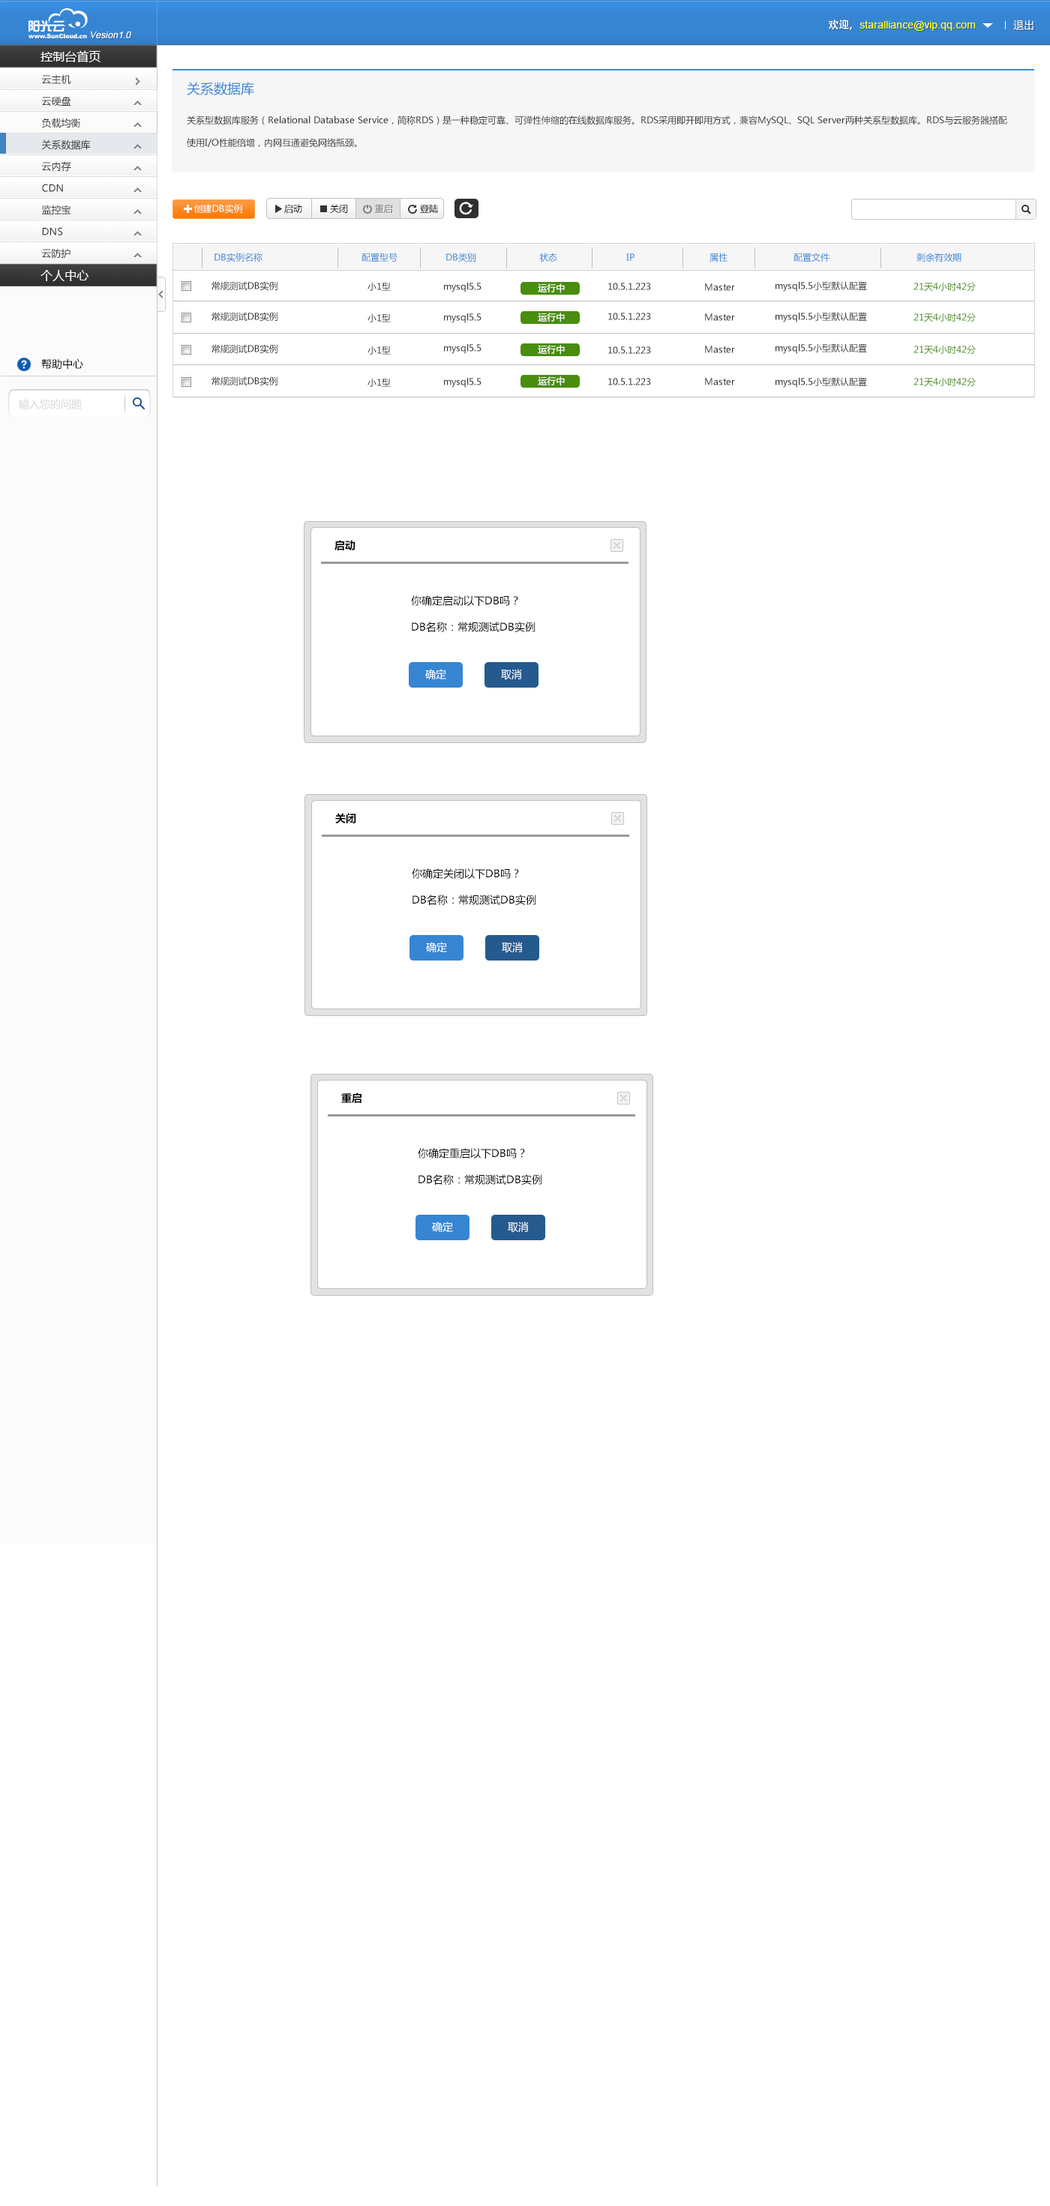
<style>
.page{position:relative;width:1050px;height:2206px;background:#ffffff}
.page>*{position:absolute;margin:0}
.t1{font:10.5px "ArialMT";color:#fcff0e}
.t2{font:10.5px "AdobeHeitiStd-Regular";color:#ffffff}
.t3{font:10.5px "MicrosoftYaHei";color:#ffffff}
.t4{font:9px "ArialMT";color:#ffffff;font-style:italic}
.t5{font:12px "MicrosoftYaHei";color:#ffffff}
.t6{font:9.8px "MicrosoftYaHei";color:#333333}
.t7{font:13.5px "MicrosoftYaHei";color:#3685d3}
.t8{font:9px/22.5px "MicrosoftYaHei";color:#333333}
.t9{font:9px "MicrosoftYaHei";color:#fefefe}
.t10{font:9px "MicrosoftYaHei";color:#000000}
.t11{font:9px "MicrosoftYaHei";color:#696868}
.t12{font:9px "MicrosoftYaHei";color:#3685d3}
.t13{font:9px "MicrosoftYaHei";color:#333333}
.t14{font:9px "MicrosoftYaHei";color:#ffffff}
.t15{font:9px "MicrosoftYaHei";color:#488d0e}
.t16{font:10.5px "MicrosoftYaHei";color:#000000}
.t17{font:10.5px "MicrosoftYaHei";color:#d7d7d7}
.t18{font:10.5px "MicrosoftYaHei-Bold";color:#000000}
.t19{font:10.5px/26.2px "MicrosoftYaHei";color:#000000}
</style>
<div class="page">
<p class="t1" style="left:829px;top:20px;width:147px;height:11px"><span class="t2">欢迎，</span>staralliance@vip.qq.com</p>
<p class="t3" style="left:1013px;top:20px;width:21px;height:10px">退出</p>
<p class="t4" style="left:91px;top:32px;width:40px;height:6px">Vesion1.0</p>
<p class="t5" style="left:40px;top:50px;width:60px;height:13px">控制台首页</p>
<p class="t6" style="left:41px;top:74px;width:30px;height:11px">云主机</p>
<p class="t7" style="left:187px;top:82px;width:67px;height:13px">关系数据库</p>
<p class="t6" style="left:41px;top:96px;width:30px;height:10px">云硬盘</p>
<p class="t6" style="left:41px;top:118px;width:39px;height:10px">负载均衡</p>
<p class="t8" style="left:187px;top:116px;width:820px;height:32px">关系型数据库服务（Relational Database Service，简称RDS）是一种稳定可靠、可弹性伸缩的在线数据库服务。RDS采用即开即用方式，兼容MySQL、SQL Server两种关系型数据库。RDS与云服务器搭配使用I/O性能倍增，内网互通避免网络瓶颈。</p>
<p class="t6" style="left:41px;top:140px;width:50px;height:10px">关系数据库</p>
<p class="t6" style="left:41px;top:161px;width:30px;height:11px">云内存</p>
<p class="t6" style="left:42px;top:184px;width:21px;height:8px">CDN</p>
<p class="t6" style="left:41px;top:205px;width:30px;height:9px">监控宝</p>
<p class="t9" style="left:194px;top:204px;width:48px;height:10px">创建DB实例</p>
<p class="t10" style="left:284px;top:204px;width:18px;height:10px">启动</p>
<p class="t10" style="left:330px;top:204px;width:18px;height:10px">关闭</p>
<p class="t11" style="left:375px;top:204px;width:18px;height:10px">重启</p>
<p class="t10" style="left:420px;top:204px;width:18px;height:9px">登陆</p>
<p class="t6" style="left:42px;top:227px;width:21px;height:9px">DNS</p>
<p class="t6" style="left:41px;top:248px;width:29px;height:11px">云防护</p>
<p class="t12" style="left:214px;top:253px;width:748px;height:9px">DB实例名称                                 配置型号                DB类别                     状态                       IP                         属性                      配置文件                             剩余有效期</p>
<p class="t5" style="left:40px;top:270px;width:48px;height:11px">个人中心</p>
<p class="t13" style="left:212px;top:281px;width:66px;height:10px">常规测试DB实例</p>
<p class="t13" style="left:776px;top:281px;width:91px;height:11px">mysql5.5小型默认配置</p>
<p class="t13" style="left:368px;top:282px;width:23px;height:9px">小1型</p>
<p class="t13" style="left:444px;top:282px;width:38px;height:10px">mysql5.5</p>
<p class="t14" style="left:538px;top:284px;width:27px;height:9px">运行中</p>
<p class="t13" style="left:608px;top:283px;width:43px;height:7px">10.5.1.223</p>
<p class="t13" style="left:705px;top:284px;width:30px;height:7px">Master</p>
<p class="t15" style="left:914px;top:282px;width:62px;height:10px">21天4小时42分</p>
<p class="t13" style="left:212px;top:312px;width:66px;height:10px">常规测试DB实例</p>
<p class="t13" style="left:368px;top:314px;width:23px;height:8px">小1型</p>
<p class="t13" style="left:444px;top:313px;width:38px;height:10px">mysql5.5</p>
<p class="t14" style="left:538px;top:313px;width:27px;height:9px">运行中</p>
<p class="t13" style="left:608px;top:313px;width:43px;height:7px">10.5.1.223</p>
<p class="t13" style="left:705px;top:314px;width:30px;height:7px">Master</p>
<p class="t13" style="left:776px;top:312px;width:91px;height:10px">mysql5.5小型默认配置</p>
<p class="t15" style="left:914px;top:313px;width:62px;height:9px">21天4小时42分</p>
<p class="t13" style="left:212px;top:344px;width:66px;height:10px">常规测试DB实例</p>
<p class="t13" style="left:368px;top:346px;width:23px;height:9px">小1型</p>
<p class="t13" style="left:444px;top:344px;width:38px;height:10px">mysql5.5</p>
<p class="t14" style="left:538px;top:345px;width:27px;height:10px">运行中</p>
<p class="t13" style="left:608px;top:346px;width:43px;height:8px">10.5.1.223</p>
<p class="t13" style="left:705px;top:346px;width:30px;height:7px">Master</p>
<p class="t13" style="left:776px;top:344px;width:91px;height:10px">mysql5.5小型默认配置</p>
<p class="t15" style="left:914px;top:345px;width:62px;height:10px">21天4小时42分</p>
<p class="t16" style="left:41px;top:358px;width:42px;height:12px">帮助中心</p>
<p class="t13" style="left:212px;top:376px;width:66px;height:10px">常规测试DB实例</p>
<p class="t13" style="left:444px;top:377px;width:38px;height:11px">mysql5.5</p>
<p class="t14" style="left:538px;top:376px;width:27px;height:10px">运行中</p>
<p class="t13" style="left:776px;top:377px;width:91px;height:11px">mysql5.5小型默认配置</p>
<p class="t15" style="left:914px;top:377px;width:62px;height:10px">21天4小时42分</p>
<p class="t13" style="left:368px;top:378px;width:23px;height:9px">小1型</p>
<p class="t13" style="left:608px;top:378px;width:43px;height:8px">10.5.1.223</p>
<p class="t13" style="left:705px;top:378px;width:30px;height:8px">Master</p>
<p class="t17" style="left:19px;top:399px;width:63px;height:11px">输入您的问题</p>
<p class="t18" style="left:334px;top:540px;width:22px;height:11px">启动</p>
<p class="t19" style="left:411px;top:596px;width:125px;height:36px">你确定启动以下DB吗？<br>DB名称：常规测试DB实例</p>
<p class="t3" style="left:425px;top:669px;width:21px;height:11px">确定</p>
<p class="t3" style="left:501px;top:669px;width:21px;height:11px">取消</p>
<p class="t18" style="left:335px;top:813px;width:21px;height:11px">关闭</p>
<p class="t19" style="left:412px;top:868px;width:124px;height:37px">你确定关闭以下DB吗？<br>DB名称：常规测试DB实例</p>
<p class="t3" style="left:426px;top:942px;width:21px;height:11px">确定</p>
<p class="t3" style="left:502px;top:942px;width:21px;height:11px">取消</p>
<p class="t18" style="left:341px;top:1093px;width:21px;height:10px">重启</p>
<p class="t19" style="left:418px;top:1148px;width:124px;height:37px">你确定重启以下DB吗？<br>DB名称：常规测试DB实例</p>
<p class="t3" style="left:432px;top:1222px;width:21px;height:11px">确定</p>
<p class="t3" style="left:508px;top:1222px;width:21px;height:11px">取消</p>
</div>
